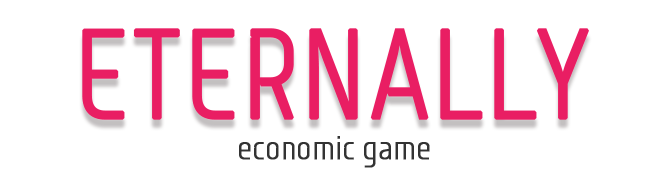
<style>
.page{position:relative;width:670px;height:190px;background:#ffffff}
.page>*{position:absolute;margin:0}
.t1{font:125px "Monitorica";color:#e91e63;text-transform:uppercase;font-weight:bold}
.t2{font:33.3px "Monitorica";color:#333333;font-weight:bold}
</style>
<div class="page">
<p class="t1" style="left:82px;top:28px;width:507px;height:92px">EternalLy</p>
<p class="t2" style="left:239px;top:136px;width:191px;height:32px">economic game</p>
</div>
